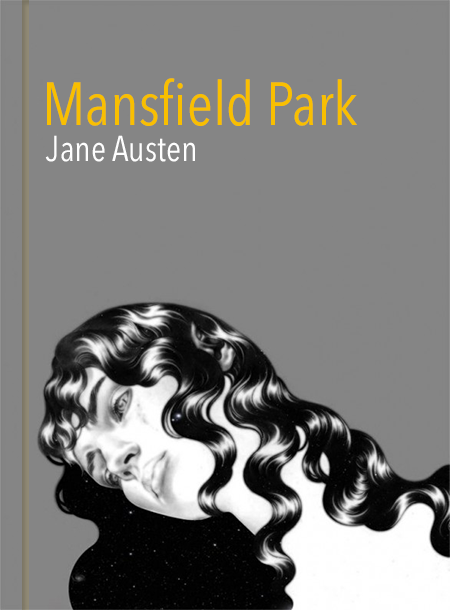
<style>
.page{position:relative;width:450px;height:610px;background:#858585}
.page>*{position:absolute;margin:0}
.t1{font:60.6px "AvenirNextCondensed-Regular";color:#f9bf00}
.t2{font:35.4px "AvenirNextCondensed-Regular";color:#fefefe}
</style>
<div class="page">
<p class="t1" style="left:47px;top:78px;width:310px;height:48px">Mansfield Park</p>
<p class="t2" style="left:45px;top:135px;width:150px;height:27px">Jane Austen</p>
</div>
